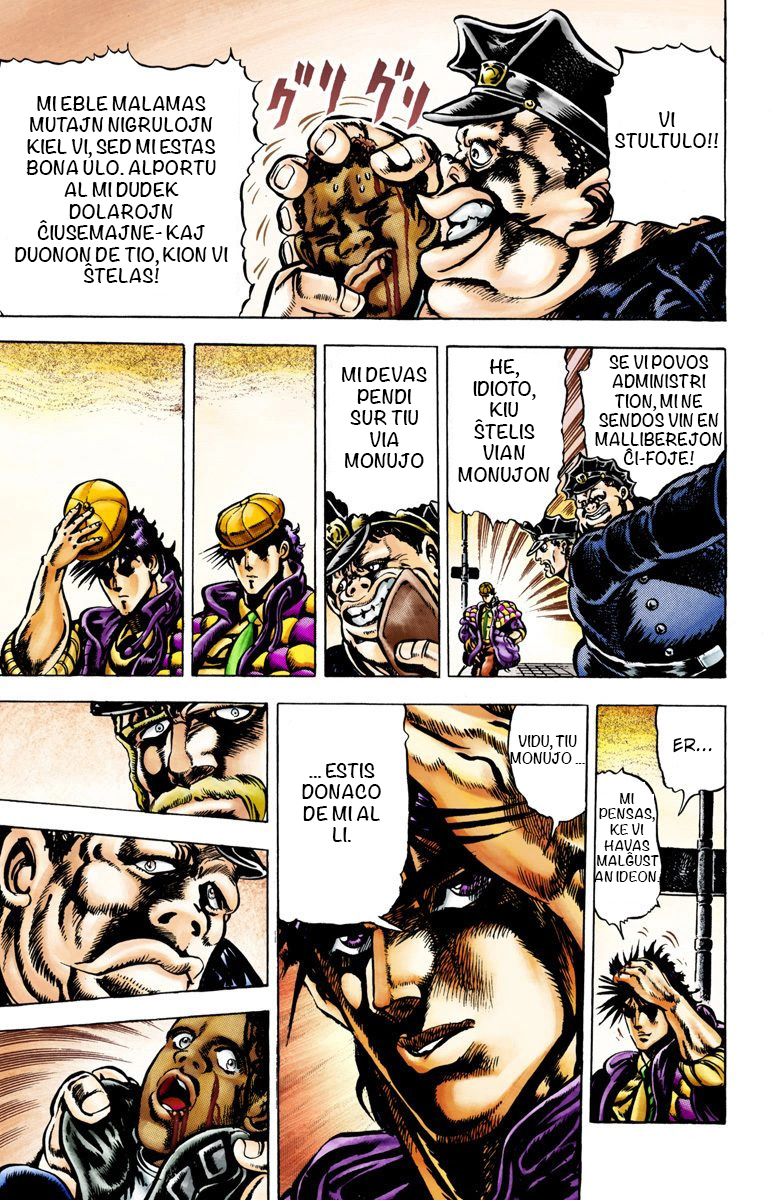
<style>
.page{position:relative;width:780px;height:1200px;background:#ffffff}
.page>*{position:absolute;margin:0}
.t1{font:18px "Noteworthy-Bold";color:#000000}
.t2{font:16px "Noteworthy-Bold";color:#000000}
.t3{font:14px "Noteworthy-Bold";color:#000000}
.t4{font:13px "Noteworthy-Bold";color:#000000}
</style>
<div class="page">
<p class="t1" style="left:15px;top:96px;width:213px;height:187px;text-align:center">MI EBLE MALAMAS MUTAJN NIGRULOJN KIEL VI, SED MI ESTAS BONA ULO. ALPORTU AL MI DUDEK DOLAROJN ĈIUSEMAJNE- KAJ DUONON DE TIO, KION VI ŜTELAS!</p>
<p class="t1" style="left:615px;top:111px;width:104px;height:37px;text-align:center">VI <br>STULTULO!!</p>
<p class="t1" style="left:342px;top:366px;width:85px;height:102px;text-align:center">MI DEVAS PENDI SUR TIU VIA MONUJO POR PRUVO. VI VIDAS!</p>
<p class="t1" style="left:458px;top:359px;width:92px;height:123px;text-align:center">HE, IDIOTO, KIU ŜTELIS VIAN MONUJON! FORIRU DE ĈI TIE!</p>
<p class="t2" style="left:595px;top:355px;width:128px;height:110px;text-align:center">SE VI POVOS ADMINISTRI TION, MI NE SENDOS VIN EN MALLIBEREJON ĈI-FOJE!</p>
<p class="t3" style="left:510px;top:735px;width:75px;height:29px;text-align:center">VIDU, TIU MONUJO ...</p>
<p class="t1" style="left:302px;top:763px;width:79px;height:79px;text-align:center">... ESTIS DONACO DE MI AL LI.</p>
<p class="t4" style="left:594px;top:793px;width:66px;height:89px;text-align:center">MI PENSAS, KE VI HAVAS MALĜUSTAN IDEON.</p>
</div>
